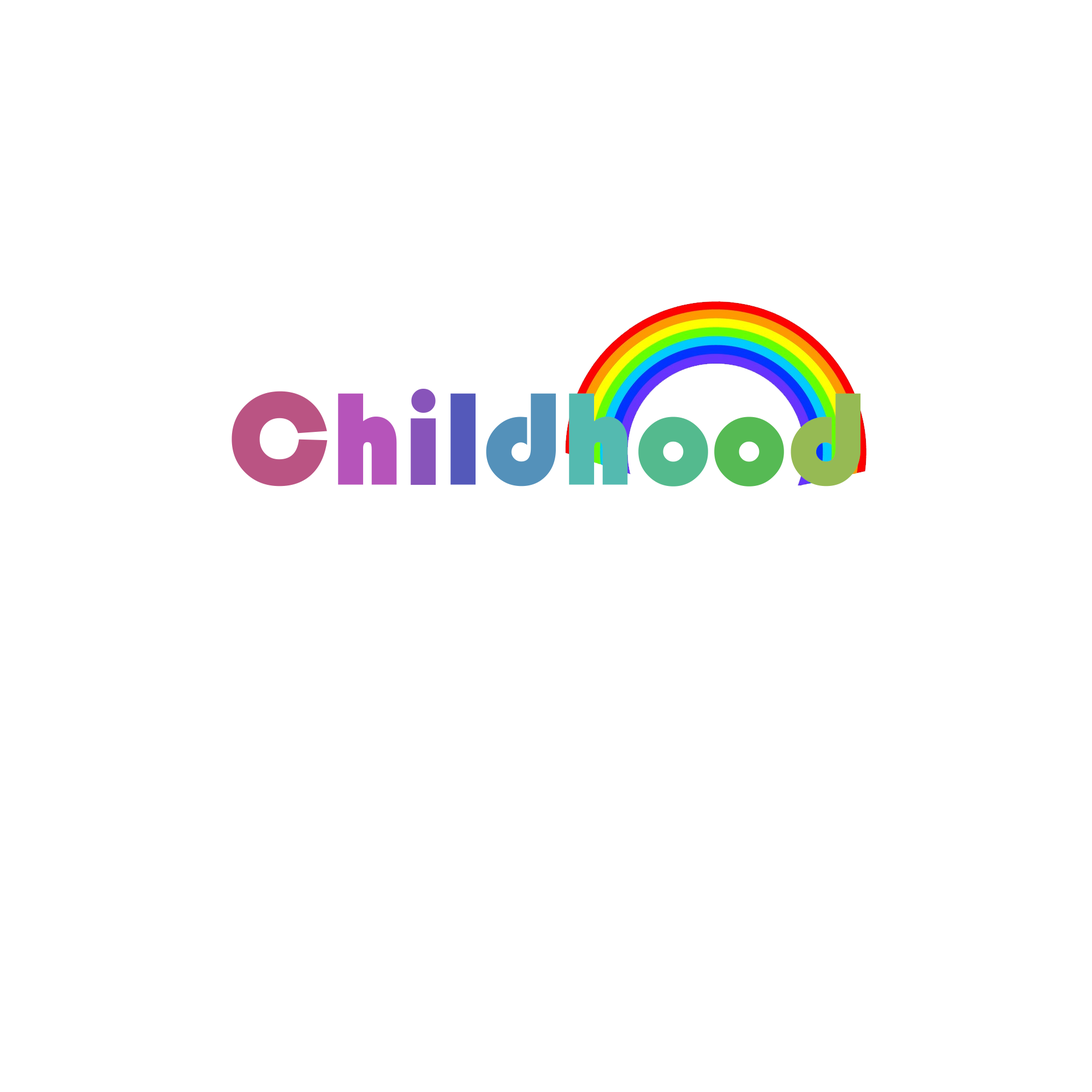
<style>
.page{position:relative;width:1092px;height:1092px;background:#ffffff}
.page>*{position:absolute;margin:0}
.t1{font:136.5px "STHupo";color:#ba5483}
.t2{font:136.5px "STHupo";color:#b654ba}
.t3{font:136.5px "STHupo";color:#8854ba}
.t4{font:136.5px "STHupo";color:#5459ba}
.t5{font:136.5px "STHupo";color:#5491ba}
.t6{font:136.5px "STHupo";color:#54bab0}
.t7{font:136.5px "STHupo";color:#54ba8e}
.t8{font:136.5px "STHupo";color:#56ba54}
.t9{font:136.5px "STHupo";color:#96ba54}
</style>
<div class="page">
<p class="t1" style="left:232px;top:389px;width:628px;height:97px">C<span class="t2">h</span><span class="t3">i</span><span class="t4">l</span><span class="t5">d</span><span class="t6">h</span><span class="t7">o</span><span class="t8">o</span><span class="t9">d</span></p>
</div>
